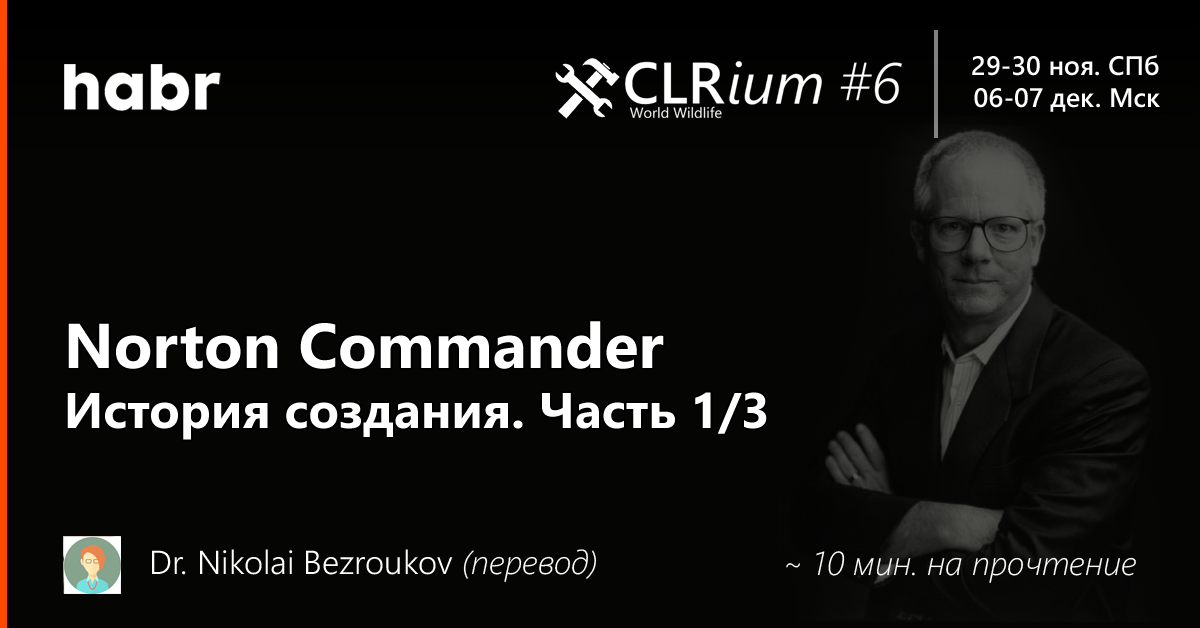
<style>
.page{position:relative;width:1200px;height:628px;background:#050504}
.page>*{position:absolute;margin:0}
.t1{font:26.7px "SegoeUI-SemiBold";color:#ffffff}
.t2{font:50px "SegoeUI-Bold";color:#ffffff}
.t3{font:63.3px "SegoeUI-Bold";color:#ffffff}
.t4{font:33.3px "SegoeUI-Semilight";color:#ffffff}
.t5{font:33.3px "SegoeUI-LightItalic";color:#ffffff}
</style>
<div class="page">
<p class="t1" style="left:972px;top:55px;width:188px;height:57px;text-align:right">29-30 ноя. СПб<br>06-07 дек. Мск</p>
<p class="t2" style="left:67px;top:321px;width:700px;height:119px"><span class="t3">Norton Commander<br></span>История создания. Часть 1/3</p>
<p class="t4" style="left:152px;top:549px;width:445px;height:33px">Dr. Nikolai Bezroukov <span class="t5">(перевод)</span></p>
<p class="t5" style="left:786px;top:551px;width:350px;height:32px">~ 10 мин. на прочтение</p>
</div>
